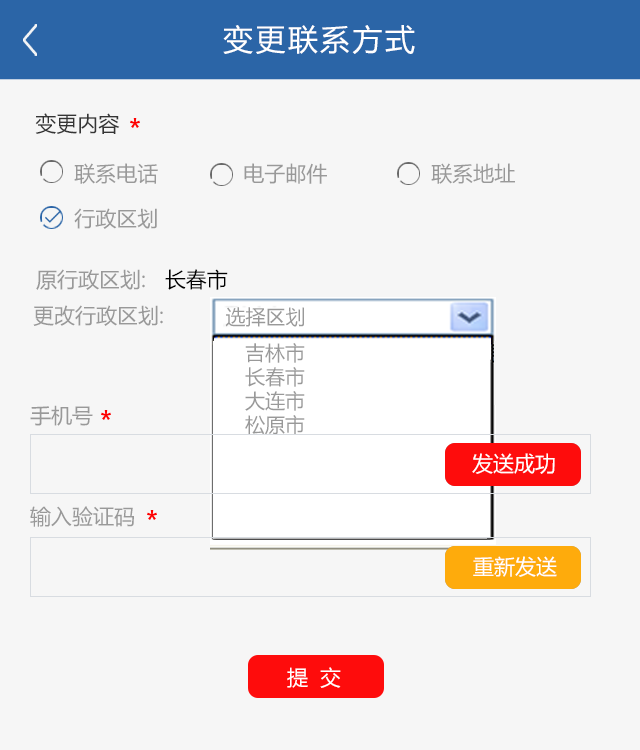
<style>
.page{position:relative;width:640px;height:750px;background:#f6f6f6}
.page>*{position:absolute;margin:0}
.t1{font:30px "MicrosoftYaHei";letter-spacing:0.08em;color:#ffffff}
.t2{font:21px "MicrosoftYaHei";color:#353535}
.t3{font:21px "MicrosoftYaHei";color:#999999}
.t4{font:21px "MicrosoftYaHei";color:#010101}
.t5{font:20px "MicrosoftYaHei";color:#999999}
.t6{font:21px "MicrosoftYaHei";color:#ffffff}
.t7{font:21px "MicrosoftYaHei";letter-spacing:0.14em;color:#ffffff}
</style>
<div class="page">
<p class="t1" style="left:223px;top:25px;width:192px;height:29px">变更联系方式</p>
<p class="t2" style="left:35px;top:113px;width:85px;height:21px">变更内容</p>
<p class="t3" style="left:74px;top:163px;width:84px;height:21px">联系电话</p>
<p class="t3" style="left:244px;top:163px;width:83px;height:21px">电子邮件</p>
<p class="t3" style="left:431px;top:163px;width:84px;height:21px">联系地址</p>
<p class="t3" style="left:74px;top:208px;width:83px;height:21px">行政区划</p>
<p class="t3" style="left:36px;top:269px;width:192px;height:21px">原行政区划:   <span class="t4">长春市</span></p>
<p class="t3" style="left:33px;top:305px;width:130px;height:21px">更改行政区划:</p>
<p class="t5" style="left:225px;top:307px;width:79px;height:20px">选择区划</p>
<p class="t5" style="left:245px;top:343px;width:60px;height:92px">吉林市<br>长春市<br>大连市<br>松原市</p>
<p class="t3" style="left:30px;top:405px;width:63px;height:21px">手机号</p>
<p class="t6" style="left:472px;top:453px;width:83px;height:21px">发送成功</p>
<p class="t3" style="left:30px;top:506px;width:104px;height:21px">输入验证码</p>
<p class="t6" style="left:473px;top:556px;width:84px;height:21px">重新发送</p>
<p class="t7" style="left:287px;top:667px;width:54px;height:21px">提 交</p>
</div>
